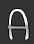
<style>
.page{position:relative;width:34px;height:44px;background:#333333}
.page>*{position:absolute;margin:0}
.t1{font:40px "IndieFlower-Regular"}
</style>
<div class="page">
<p class="t1" style="left:7px;top:9px;width:22px;height:31px">A</p>
</div>
